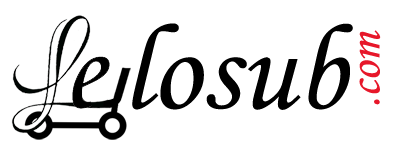
<style>
.page{position:relative;width:409px;height:165px;background:#ffffff}
.page>*{position:absolute;margin:0}
.t1{font:122.3px "MonotypeCorsiva";color:#000000}
.t2{font:47.4px "MonotypeCorsiva";color:#e7172a}
</style>
<div class="page">
<p class="t1" style="left:132px;top:23px;width:221px;height:87px">losub</p>
<p class="t2" style="left:359px;top:30px;width:22px;height:75px;rotate:-90deg">.com</p>
</div>
